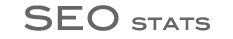
<style>
.page{position:relative;width:233px;height:39px;background:#ffffff}
.page>*{position:absolute;margin:0}
.t1{font:20px "BlairMdITCTTMedium";color:#666666}
.t2{font:33px "BlairMdITCTTMedium";color:#666666}
</style>
<div class="page">
<p class="t1" style="left:24px;top:5px;width:186px;height:26px"><span class="t2">SEO </span>stats</p>
</div>
